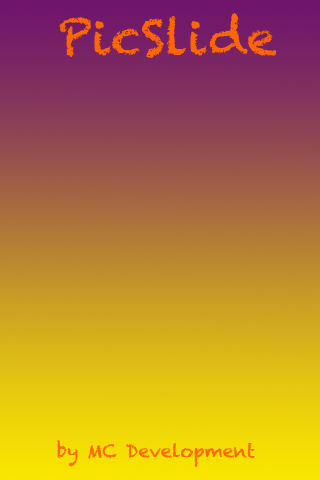
<style>
.page{position:relative;width:320px;height:480px}
.page>*{position:absolute;margin:0}
.t1{font:48px "Chalkduster";color:#fe6600}
.t2{font:18px "Chalkduster";color:#fe6600}
</style>
<div class="page">
<p class="t1" style="left:59px;top:13px;width:218px;height:45px">PicSlide</p>
<p class="t2" style="left:57px;top:440px;width:198px;height:27px">by MC Development</p>
</div>
